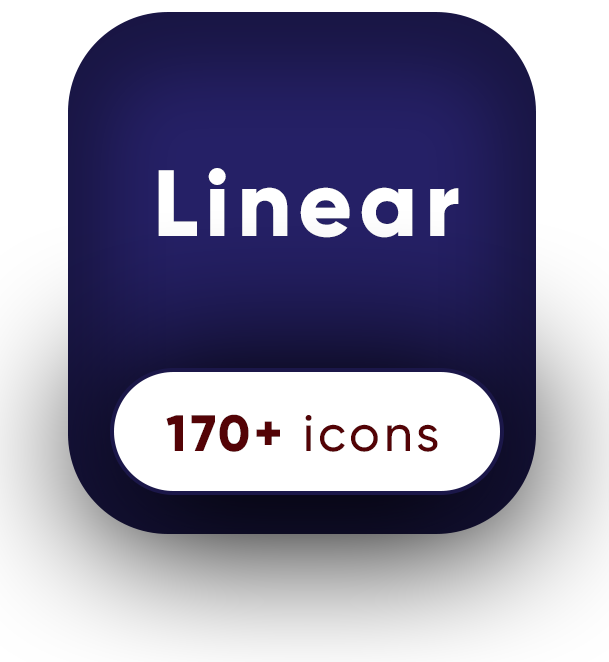
<style>
.page{position:relative;width:609px;height:662px;background:#ffffff}
.page>*{position:absolute;margin:0}
.t1{font:93.8px "Gilroy-ExtraBold";letter-spacing:0.075em;color:#ffffff}
.t2{font:50.9px "Gilroy-Medium";letter-spacing:0.075em;color:#540306}
.t3{font:50.9px "Gilroy-ExtraBold";letter-spacing:0.075em;color:#540306}
</style>
<div class="page">
<p class="t1" style="left:158px;top:168px;width:301px;height:70px">Linear</p>
<p class="t2" style="left:166px;top:414px;width:272px;height:38px"><span class="t3">170+ </span>icons</p>
</div>
